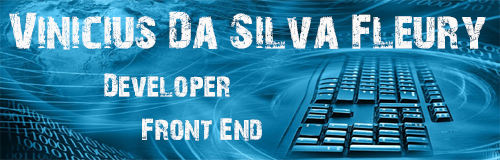
<style>
.page{position:relative;width:500px;height:160px}
.page>*{position:absolute;margin:0}
.t1{font:48px "28DaysLater";color:#faf9f7}
.t2{font:30px "28DaysLater";color:#faf9f7}
</style>
<div class="page">
<p class="t1" style="left:9px;top:11px;width:477px;height:39px">Vinicius Da Silva Fleury</p>
<p class="t2" style="left:104px;top:73px;width:158px;height:68px;text-align:center">Developer<br>            Front End</p>
</div>
